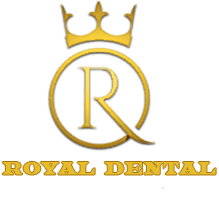
<style>
.page{position:relative;width:219px;height:200px;background:#ffffff}
.page>*{position:absolute;margin:0}
.t1{font:17.3px "Latin";letter-spacing:0.04em;color:#e6bc2c;font-weight:bold;scale:0.75 1}
</style>
<div class="page">
<p class="t1" style="left:2px;top:162px;width:214px;height:13px">ROYAL  DENTAL</p>
</div>
